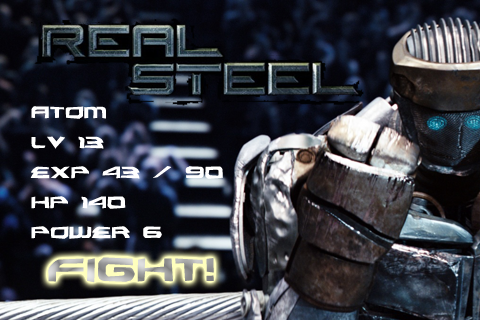
<style>
.page{position:relative;width:480px;height:320px}
.page>*{position:absolute;margin:0}
.t1{font:30px/30px "AlexisGrunge";color:#ffffff}
</style>
<div class="page">
<p class="t1" style="left:30px;top:106px;width:193px;height:133px">Atom<br>Lv 13<br>exp 43 / 90<br>hp 140<br>power 6</p>
</div>
